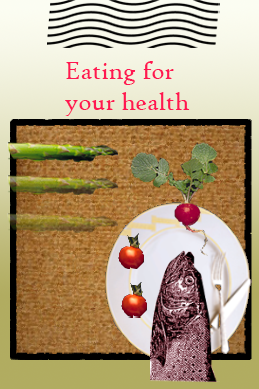
<style>
.page{position:relative;width:259px;height:389px}
.page>*{position:absolute;margin:0}
.t1{font:26px "HighTowerText-Reg";color:#ff1751}
</style>
<div class="page">
<p class="t1" style="left:65px;top:61px;width:125px;height:55px">Eating for<br>your health</p>
</div>
